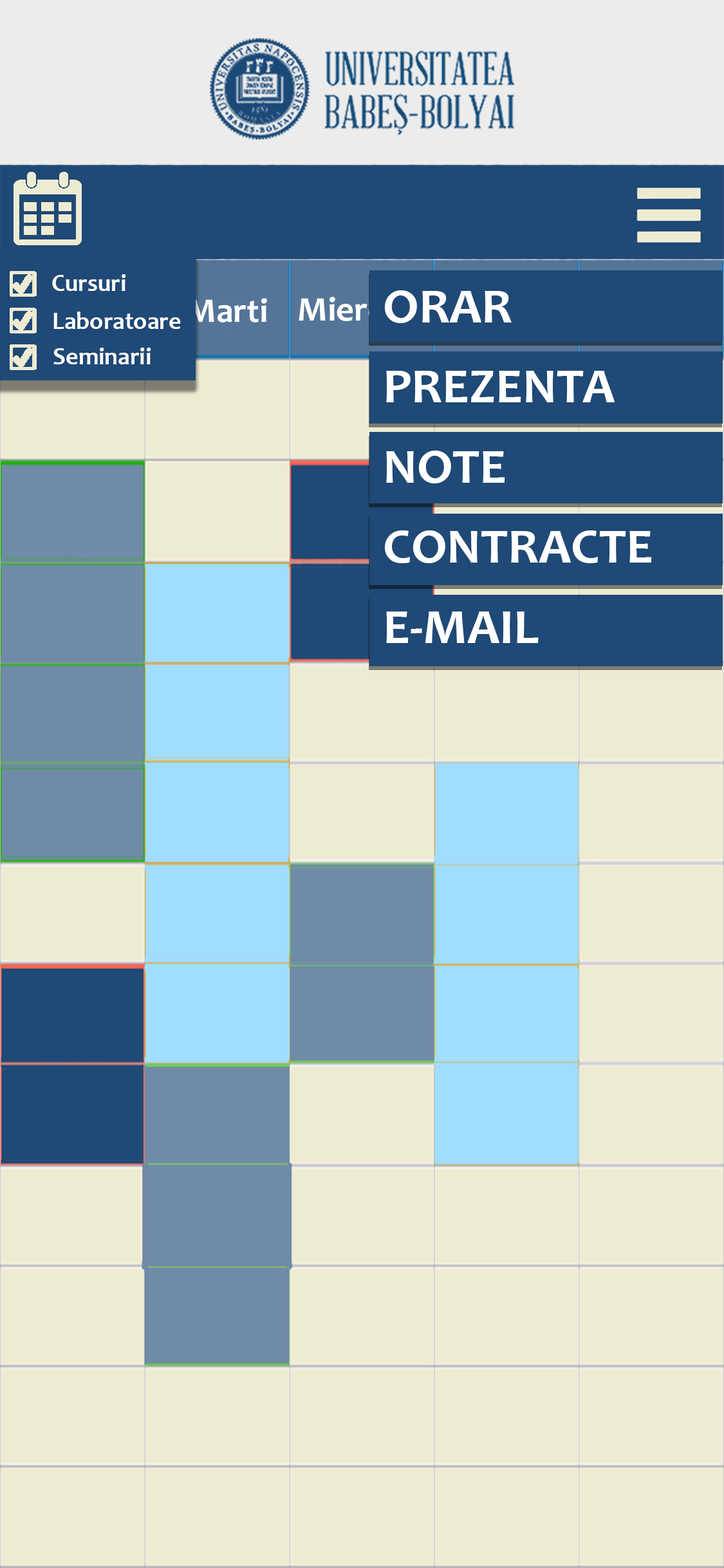
<style>
.page{position:relative;width:724px;height:1568px;background:#eeebd3}
.page>*{position:absolute;margin:0}
.t1{font:24.4px "Candara-Bold";color:#ffffff}
.t2{font:49.7px/80.2px "Candara-Bold";color:#ffffff;scale:1.03 1}
.t3{font:34.6px "Candara-Bold";color:#ffffff}
</style>
<div class="page">
<p class="t1" style="left:52px;top:274px;width:74px;height:17px">Cursuri</p>
<p class="t2" style="left:385px;top:290px;width:267px;height:353px">ORAR<br>PREZENTA<br>NOTE<br>CONTRACTE<br>E-MAIL</p>
<p class="t3" style="left:187px;top:298px;width:80px;height:24px">Marti</p>
<p class="t3" style="left:299px;top:297px;width:124px;height:24px">Miercuri</p>
<p class="t1" style="left:53px;top:312px;width:128px;height:17px">Laboratoare</p>
<p class="t1" style="left:53px;top:348px;width:98px;height:16px">Seminarii</p>
</div>
